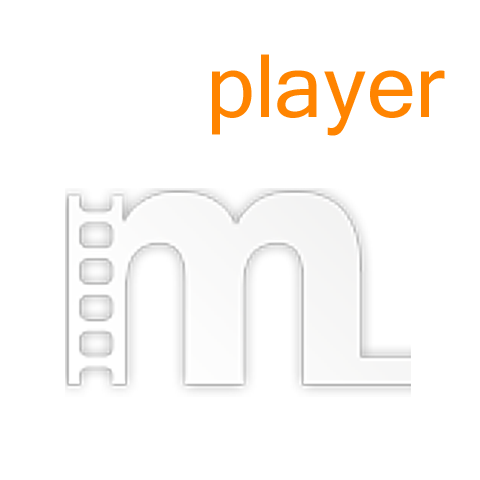
<style>
.page{position:relative;width:480px;height:480px;background:#ffffff}
.page>*{position:absolute;margin:0}
.t1{font:84.4px "Kartika";color:#ff8400}
</style>
<div class="page">
<p class="t1" style="left:212px;top:54px;width:233px;height:82px">player</p>
</div>
